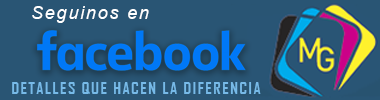
<style>
.page{position:relative;width:380px;height:100px;background:#295574}
.page>*{position:absolute;margin:0}
.t1{font:18px "Arial-ItalicMT";letter-spacing:0.1em;color:#ffffff}
.t2{font:16px "AgencyFB-Bold";letter-spacing:0.1em;color:#77bae8}
</style>
<div class="page">
<p class="t1" style="left:32px;top:6px;width:117px;height:17px">Seguinos en</p>
<p class="t2" style="left:12px;top:82px;width:249px;height:12px">DETALLES QUE HACEN LA DIFERENCIA</p>
</div>
